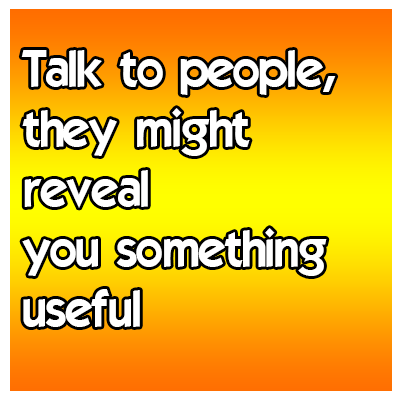
<style>
.page{position:relative;width:400px;height:400px}
.page>*{position:absolute;margin:0}
.t1{font:50px "ELEGANCE";color:#ffffff}
</style>
<div class="page">
<p class="t1" style="left:21px;top:50px;width:315px;height:277px">Talk to people,<br>they might<br>reveal<br>you something<br>useful</p>
</div>
